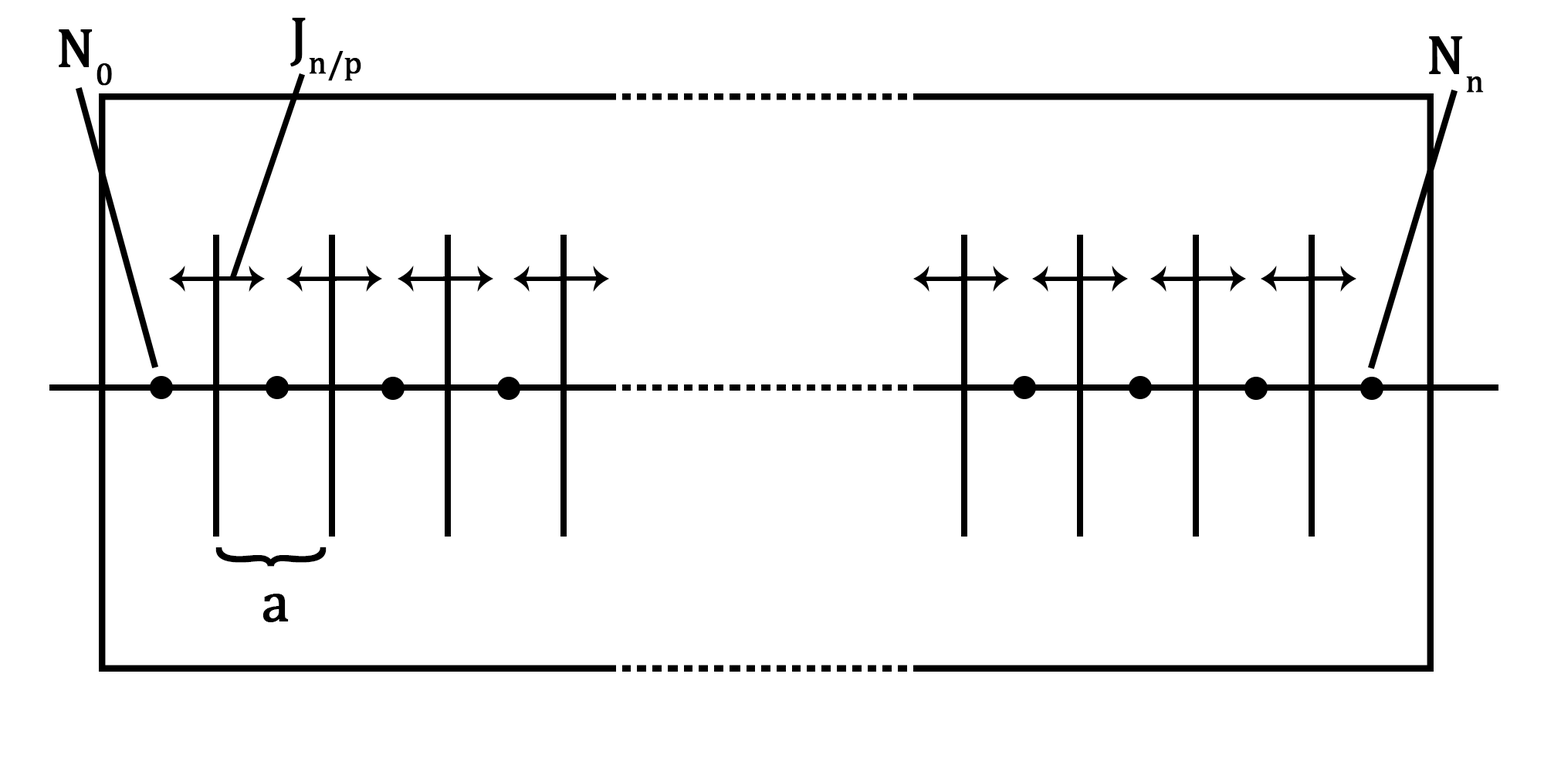
<style>
.page{position:relative;width:1544px;height:772px;background:#ffffff}
.page>*{position:absolute;margin:0}
.t1{font:55.6px "CambriaMath";color:#000000;font-weight:bold}
.t2{font:116.4px "CambriaMath";color:#000000;font-weight:bold;scale:0.48 1}
</style>
<div class="page">
<p class="t1" style="left:290px;top:18px;width:71px;height:63px">Jn/p</p>
<p class="t1" style="left:59px;top:29px;width:53px;height:57px">N0</p>
<p class="t1" style="left:1429px;top:36px;width:55px;height:57px">Nn</p>
<p class="t2" style="left:215px;top:547px;width:112px;height:20px;rotate:-90deg">{</p>
<p class="t1" style="left:263px;top:594px;width:26px;height:28px">a</p>
</div>
